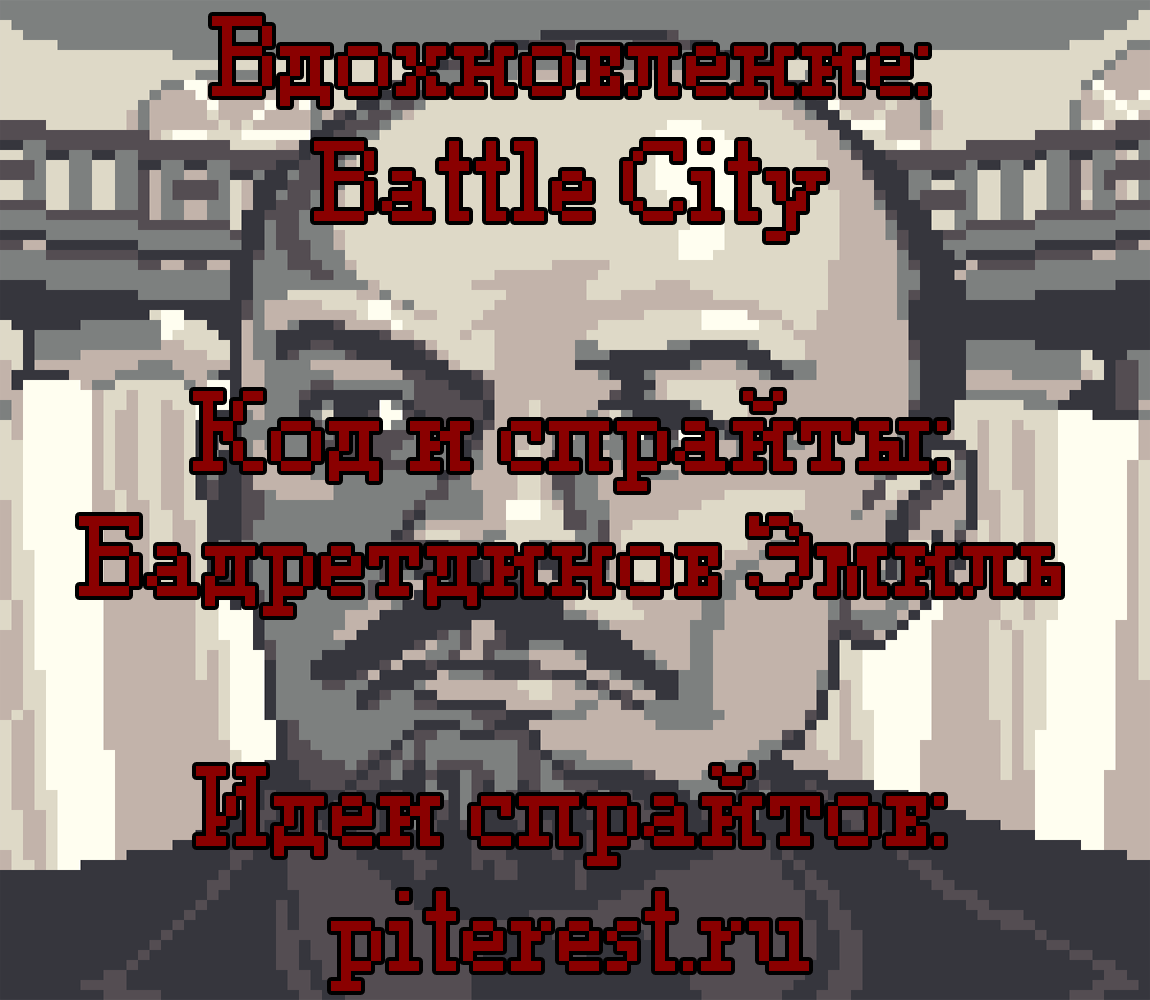
<style>
.page{position:relative;width:1150px;height:1000px}
.page>*{position:absolute;margin:0}
.t1{font:100px/125px "PixelTimes";letter-spacing:-0.02em;color:#8a0000}
</style>
<div class="page">
<p class="t1" style="left:79px;top:16px;width:982px;height:975px;text-align:center">Вдохновление:<br>Battle City<br><br>Код и спрайты:<br>Бадретдинов Эмиль<br><br>Идеи спрайтов:<br>piterest.ru</p>
</div>
